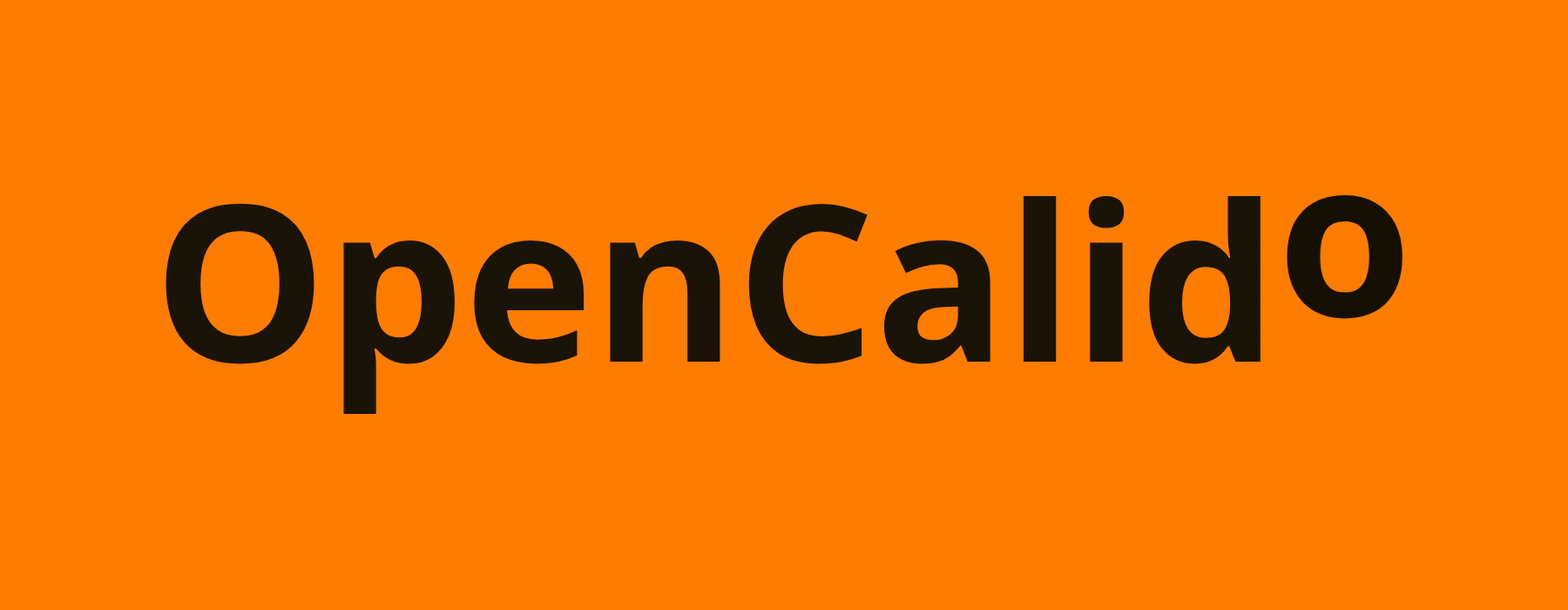
<style>
.page{position:relative;width:1568px;height:610px;background:#fe7c00}
.page>*{position:absolute;margin:0}
.t1{font:217.8px "OpenSans-Bold";color:#1a0f06}
.t2{font:217.8px "OpenSans-Bold";letter-spacing:0.1em;color:#160c01}
</style>
<div class="page">
<p class="t1" style="left:166px;top:194px;width:1236px;height:221px">OpenCalid<span class="t2">o</span></p>
</div>
